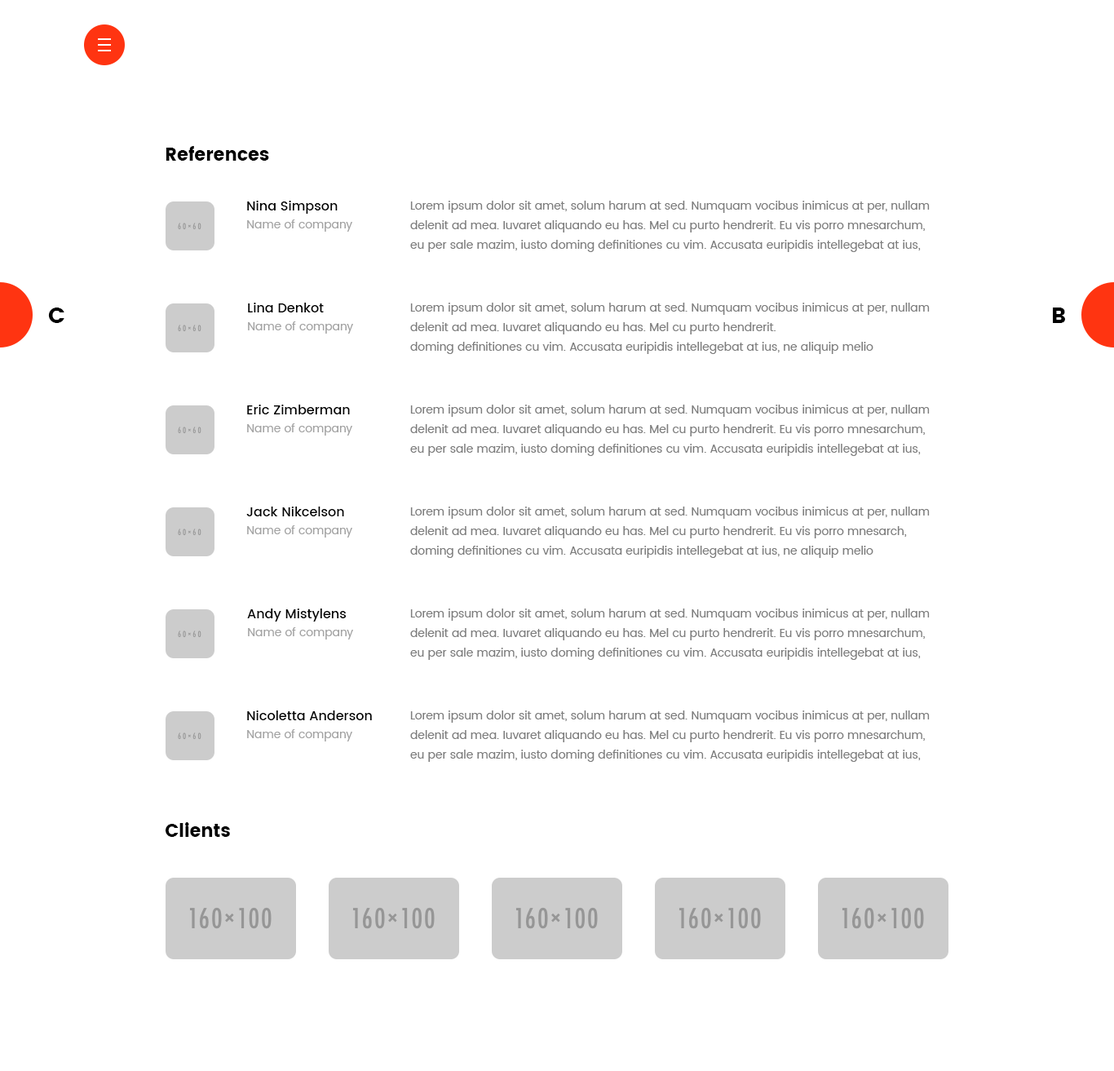
<style>
.page{position:relative;width:1114px;height:1071px;background:#ffffff}
.page>*{position:absolute;margin:0}
.t1{font:17.9px "Poppins";color:#000000}
.t2{font:13px "Poppins-Medium";color:#000000}
.t3{font:11.4px/19.6px "Poppins-Regular";color:#7d7d7d}
.t4{font:11.4px "Poppins-Regular";color:#a3a3a3}
.t5{font:22px "Poppins";color:#000000}
</style>
<div class="page">
<p class="t1" style="left:166px;top:146px;width:103px;height:15px">References</p>
<p class="t2" style="left:247px;top:201px;width:91px;height:13px">Nina Simpson</p>
<p class="t3" style="left:410px;top:201px;width:520px;height:51px">Lorem ipsum dolor sit amet, solum harum at sed. Numquam vocibus inimicus at per, nullam delenit ad mea. Iuvaret aliquando eu has. Mel cu purto hendrerit. Eu vis porro mnesarchum, eu per sale mazim, iusto doming definitiones cu vim. Accusata euripidis intellegebat at ius, ne aliquip melio</p>
<p class="t4" style="left:247px;top:219px;width:105px;height:13px">Name of company</p>
<p class="t2" style="left:248px;top:303px;width:76px;height:9px">Lina Denkot</p>
<p class="t3" style="left:410px;top:303px;width:520px;height:51px">Lorem ipsum dolor sit amet, solum harum at sed. Numquam vocibus inimicus at per, nullam delenit ad mea. Iuvaret aliquando eu has. Mel cu purto hendrerit.<br>doming definitiones cu vim. Accusata euripidis intellegebat at ius, ne aliquip melio</p>
<p class="t5" style="left:48px;top:307px;width:16px;height:16px">C</p>
<p class="t5" style="left:1053px;top:307px;width:12px;height:16px">B</p>
<p class="t4" style="left:248px;top:321px;width:105px;height:12px">Name of company</p>
<p class="t2" style="left:247px;top:404px;width:103px;height:10px">Eric Zimberman</p>
<p class="t3" style="left:410px;top:404px;width:520px;height:52px">Lorem ipsum dolor sit amet, solum harum at sed. Numquam vocibus inimicus at per, nullam delenit ad mea. Iuvaret aliquando eu has. Mel cu purto hendrerit. Eu vis porro mnesarchum, eu per sale mazim, iusto doming definitiones cu vim. Accusata euripidis intellegebat at ius, ne aliquip melio</p>
<p class="t4" style="left:247px;top:423px;width:105px;height:12px">Name of company</p>
<p class="t2" style="left:246px;top:506px;width:98px;height:10px">Jack Nikcelson</p>
<p class="t3" style="left:410px;top:506px;width:520px;height:52px">Lorem ipsum dolor sit amet, solum harum at sed. Numquam vocibus inimicus at per, nullam delenit ad mea. Iuvaret aliquando eu has. Mel cu purto hendrerit. Eu vis porro mnesarch,<br>doming definitiones cu vim. Accusata euripidis intellegebat at ius, ne aliquip melio</p>
<p class="t4" style="left:247px;top:525px;width:105px;height:12px">Name of company</p>
<p class="t2" style="left:247px;top:608px;width:100px;height:13px">Andy Mistylens</p>
<p class="t3" style="left:410px;top:608px;width:520px;height:52px">Lorem ipsum dolor sit amet, solum harum at sed. Numquam vocibus inimicus at per, nullam delenit ad mea. Iuvaret aliquando eu has. Mel cu purto hendrerit. Eu vis porro mnesarchum, eu per sale mazim, iusto doming definitiones cu vim. Accusata euripidis intellegebat at ius, ne aliquip melio</p>
<p class="t4" style="left:248px;top:627px;width:105px;height:12px">Name of company</p>
<p class="t2" style="left:247px;top:710px;width:125px;height:10px">Nicoletta Anderson</p>
<p class="t3" style="left:410px;top:710px;width:520px;height:52px">Lorem ipsum dolor sit amet, solum harum at sed. Numquam vocibus inimicus at per, nullam delenit ad mea. Iuvaret aliquando eu has. Mel cu purto hendrerit. Eu vis porro mnesarchum, eu per sale mazim, iusto doming definitiones cu vim. Accusata euripidis intellegebat at ius, ne aliquip melio</p>
<p class="t4" style="left:247px;top:729px;width:105px;height:12px">Name of company</p>
<p class="t1" style="left:166px;top:822px;width:64px;height:15px">Clients</p>
</div>
